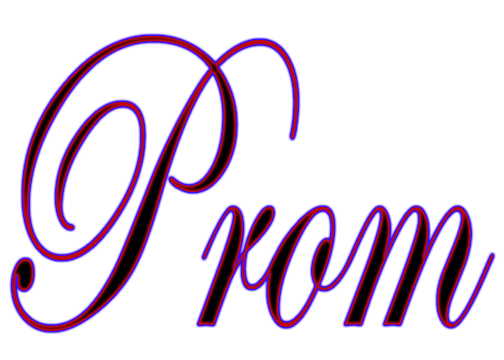
<style>
.page{position:relative;width:504px;height:360px;background:#ffffff}
.page>*{position:absolute;margin:0}
.t1{font:434.7px "EdwardianScriptITC";scale:0.6 1}
</style>
<div class="page">
<p class="t1" style="left:12px;top:35px;width:482px;height:297px">Prom</p>
</div>
